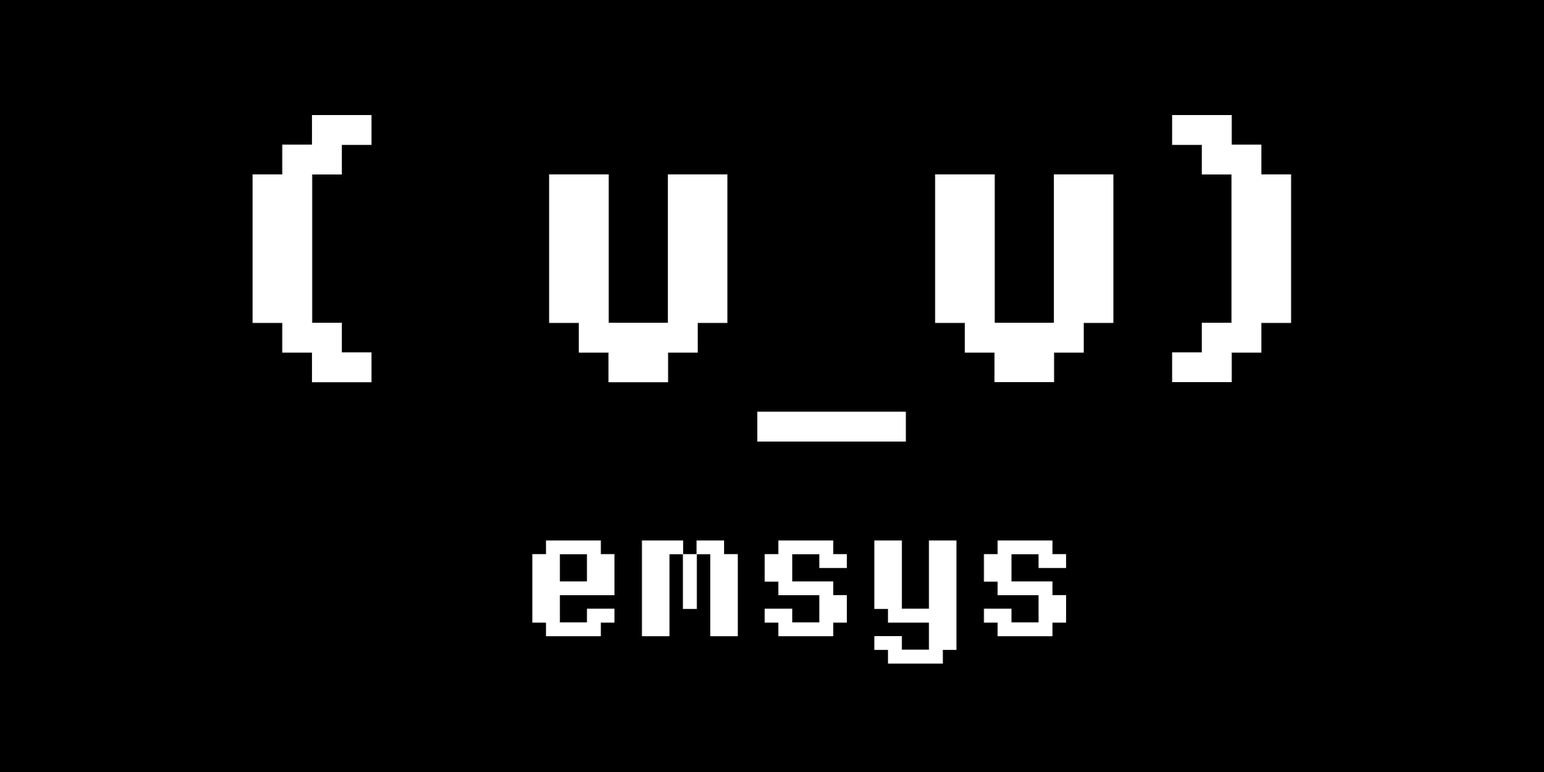
<style>
.page{position:relative;width:1544px;height:772px;background:#000000}
.page>*{position:absolute;margin:0}
.t1{font:474.9px/254.2px "PixelOperator-Bold";color:#ffffff}
.t2{font:218.8px/254.2px "PixelOperator-Bold";color:#ffffff}
</style>
<div class="page">
<p class="t1" style="left:252px;top:115px;width:1040px;height:549px;text-align:center">( v_v)<br><span class="t2"> emsys</span></p>
</div>
